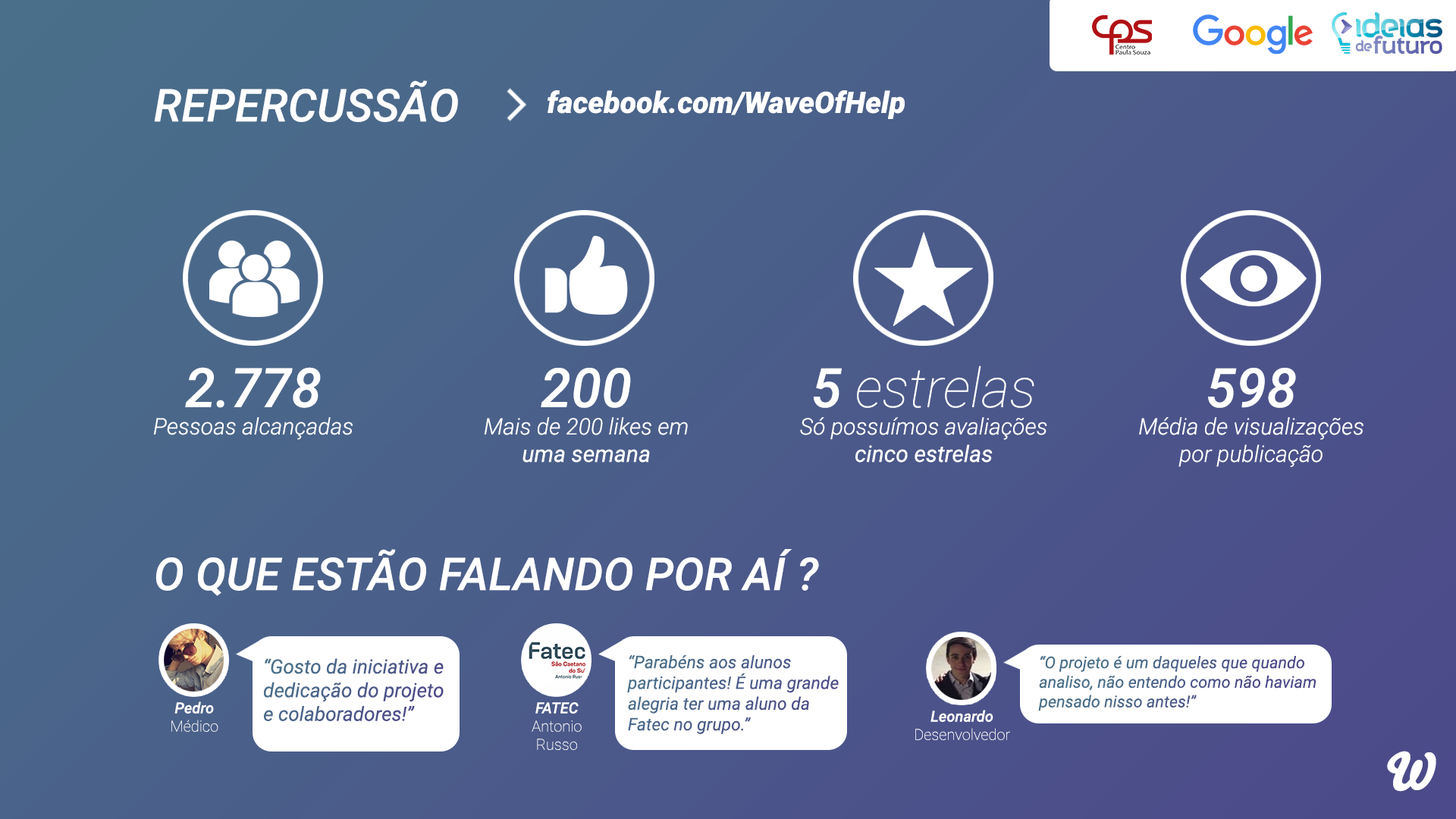
<style>
.page{position:relative;width:1456px;height:819px}
.page>*{position:absolute;margin:0}
.t1{font:45.3px "Roboto-MediumItalic";color:#ffffff}
.t2{font:29.6px "Roboto-BlackItalic";color:#ffffff}
.t3{font:22.8px "Roboto-LightItalic";color:#ffffff}
.t4{font:54.6px "Roboto-MediumItalic";color:#ffffff}
.t5{font:54.6px "Roboto-ThinItalic";color:#ffffff}
.t6{font:22.8px "Roboto-Italic";color:#ffffff}
.t7{font:22.7px "Roboto-LightItalic";color:#ffffff}
.t8{font:19.7px "Roboto-Italic";color:#4a5d8a}
.t9{font:17.3px "Roboto-Italic";color:#4a618a}
.t10{font:16.3px "Roboto-Italic";color:#4a638a}
.t11{font:15.2px "Roboto-Thin";color:#ffffff}
.t12{font:15.2px "Roboto-MediumItalic";color:#ffffff}
.t13{font:50.8px "Bello-Pro";color:#ffffff}
</style>
<div class="page">
<p class="t1" style="left:154px;top:80px;width:304px;height:42px">REPERCUSSÃO</p>
<p class="t2" style="left:548px;top:90px;width:357px;height:29px">facebook.com/WaveOfHelp</p>
<p class="t3" style="left:800px;top:366px;width:247px;height:97px;text-align:center"><span class="t4">5 </span><span class="t5">estrelas<br></span>Só possuímos avaliações<br><span class="t6">cinco estrelas</span></p>
<p class="t7" style="left:154px;top:367px;width:199px;height:73px;text-align:center"><span class="t4">2.778<br></span>Pessoas alcançadas</p>
<p class="t3" style="left:484px;top:368px;width:204px;height:95px;text-align:center"><span class="t4">200<br></span>Mais de 200 likes em<br><span class="t6">uma semana</span></p>
<p class="t3" style="left:1139px;top:368px;width:224px;height:99px;text-align:center"><span class="t4">598<br></span>Média de visualizações<br>por publicação</p>
<p class="t1" style="left:155px;top:549px;width:664px;height:47px">O QUE ESTÃO FALANDO POR AÍ ?</p>
<p class="t8" style="left:264px;top:658px;width:180px;height:63px">“Gosto da iniciativa e <br>dedicação do projeto <br>e colaboradores!”</p>
<p class="t9" style="left:627px;top:654px;width:212px;height:80px">“Parabéns aos alunos <br>participantes! É uma grande <br>alegria ter uma aluno da <br>Fatec no grupo.”</p>
<p class="t10" style="left:1038px;top:655px;width:278px;height:56px">“O projeto é um daqueles que quando<br>analiso, não entendo como não haviam<br>pensado nisso antes!”</p>
<p class="t11" style="left:171px;top:701px;width:47px;height:31px;text-align:center"><span class="t12">Pedro<br></span>Médico</p>
<p class="t11" style="left:532px;top:702px;width:50px;height:48px;text-align:center"><span class="t12">FATEC<br></span>Antonio<br>Russo</p>
<p class="t11" style="left:915px;top:710px;width:95px;height:30px;text-align:center"><span class="t12">Leonardo<br></span>Desenvolvedor</p>
<p class="t13" style="left:1387px;top:751px;width:49px;height:41px">W</p>
</div>
